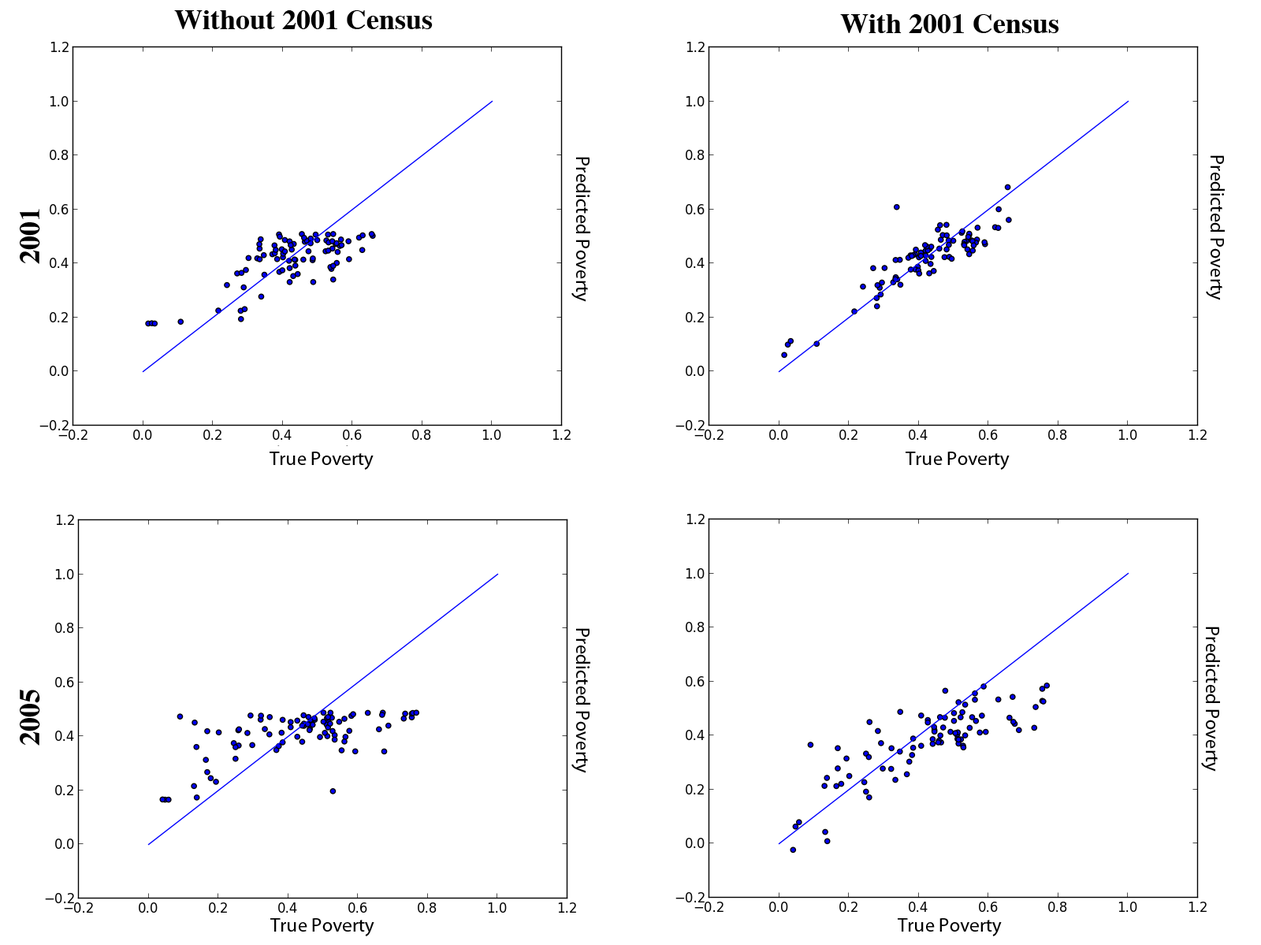
<style>
.page{position:relative;width:1261px;height:945px;background:#ffffff}
.page>*{position:absolute;margin:0}
.t1{font:28.4px "Times-Bold";color:#000000}
.t2{font:19.7px "MyriadPro-Regular";color:#000000}
</style>
<div class="page">
<p class="t1" style="left:174px;top:10px;width:259px;height:19px">Without 2001 Census</p>
<p class="t1" style="left:840px;top:14px;width:220px;height:19px">With 2001 Census</p>
<p class="t2" style="left:572px;top:157px;width:19px;height:145px;rotate:90deg">Predicted Poverty</p>
<p class="t2" style="left:1206px;top:155px;width:19px;height:145px;rotate:90deg">Predicted Poverty</p>
<p class="t1" style="left:20px;top:209px;width:20px;height:55px;rotate:-90deg">2001</p>
<p class="t2" style="left:270px;top:452px;width:104px;height:18px">True Poverty</p>
<p class="t2" style="left:906px;top:452px;width:104px;height:18px">True Poverty</p>
<p class="t2" style="left:572px;top:628px;width:19px;height:145px;rotate:90deg">Predicted Poverty</p>
<p class="t2" style="left:1202px;top:627px;width:18px;height:145px;rotate:90deg">Predicted Poverty</p>
<p class="t1" style="left:20px;top:690px;width:20px;height:56px;rotate:-90deg">2005</p>
<p class="t2" style="left:270px;top:918px;width:104px;height:19px">True Poverty</p>
<p class="t2" style="left:898px;top:918px;width:104px;height:19px">True Poverty</p>
</div>
